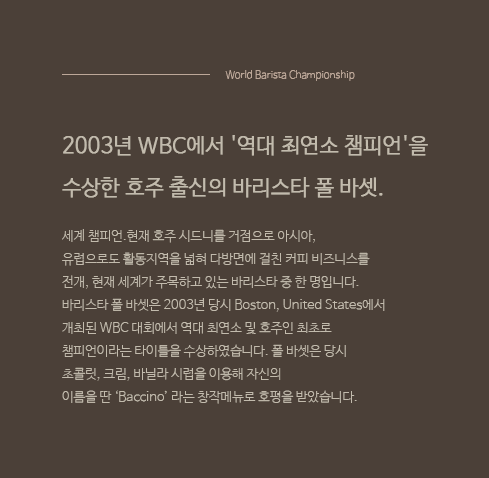
<style>
.page{position:relative;width:489px;height:478px;background:#4b4038}
.page>*{position:absolute;margin:0}
.t1{font:10px "NanumBarunGothicLight";color:#bda899}
.t2{font:21px/42px "NanumBarunGothicLight";color:#c2bbad;font-weight:bold}
.t3{font:13px/23px "NanumBarunGothicLight";color:#c2bbad}
</style>
<div class="page">
<p class="t1" style="left:225px;top:70px;width:130px;height:11px">World Barista Championship</p>
<p class="t2" style="left:62px;top:135px;width:366px;height:63px">2003년 WBC에서 '역대 최연소 챔피언'을 <br>수상한 호주 출신의 바리스타 폴 바셋.</p>
<p class="t3" style="left:62px;top:229px;width:323px;height:175px">세계 챔피언.현재 호주 시드니를 거점으로 아시아, <br>유럽으로도 활동지역을 넓혀 다방면에 걸친 커피 비즈니스를 <br>전개, 현재 세계가 주목하고 있는 바리스타 중 한 명입니다.<br>바리스타 폴 바셋은 2003년 당시 Boston, United States에서 <br>개최된 WBC 대회에서 역대 최연소 및 호주인 최초로 <br>챔피언이라는 타이틀을 수상하였습니다. 폴 바셋은 당시 <br>초콜릿, 크림, 바닐라 시럽을 이용해 자신의 <br>이름을 딴 ‘Baccino’ 라는 창작메뉴로 호평을 받았습니다.</p>
</div>
